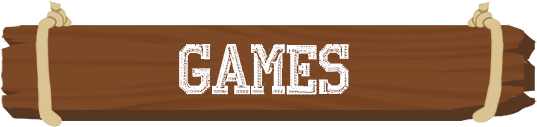
<style>
.page{position:relative;width:537px;height:127px;background:#ffffff}
.page>*{position:absolute;margin:0}
.t1{font:72px "PORNFASHION-TRIAL";color:#ffffff}
</style>
<div class="page">
<p class="t1" style="left:179px;top:43px;width:170px;height:52px">Games</p>
</div>
